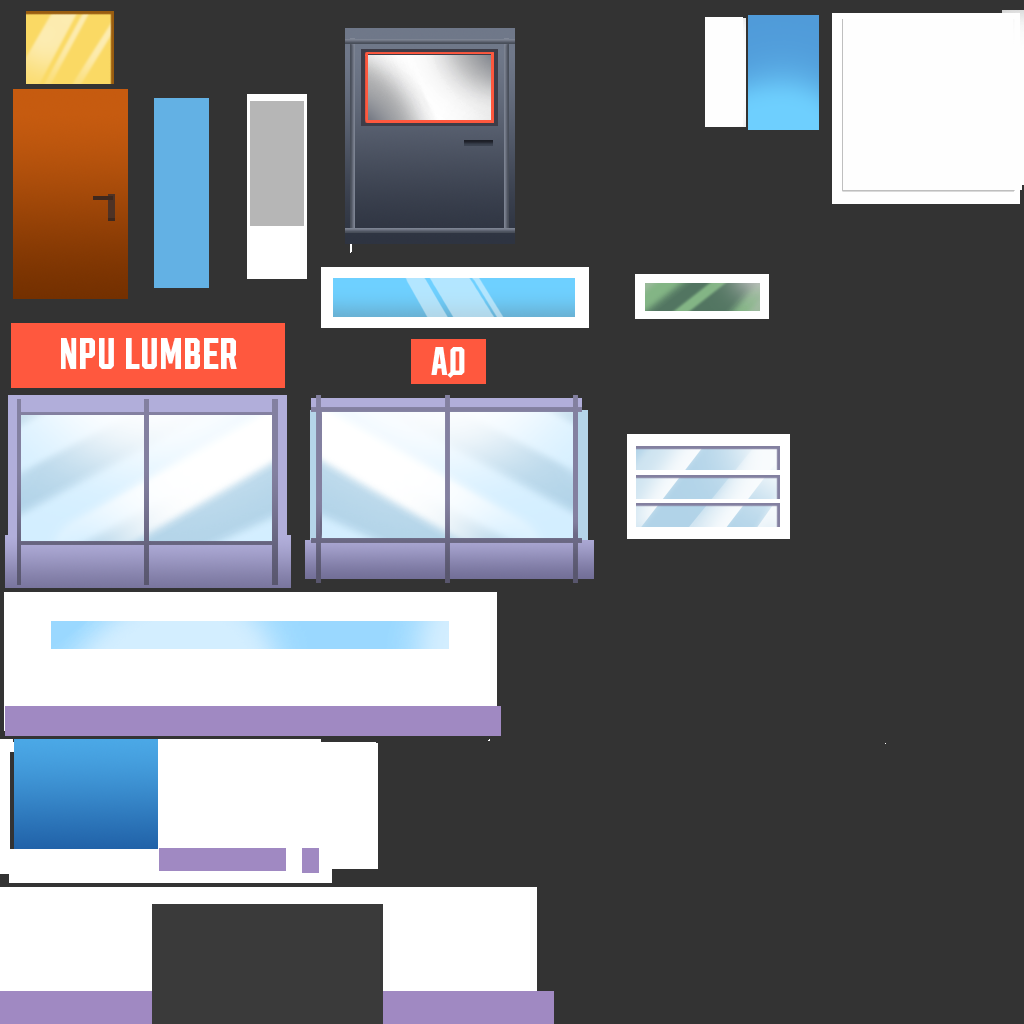
<style>
.page{position:relative;width:1024px;height:1024px;background:#333333}
.page>*{position:absolute;margin:0}
.t1{font:43px "PinkSans-130";color:#ffffff}
</style>
<div class="page">
<p class="t1" style="left:61px;top:338px;width:176px;height:31px">NPU LUMBER</p>
</div>
